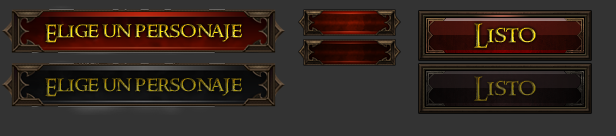
<style>
.page{position:relative;width:616px;height:136px;background:#333333}
.page>*{position:absolute;margin:0}
.t1{font:20.8px "RingbearerMedium";letter-spacing:-0.035em;scale:1.11 1}
.t2{font:23.1px "RingbearerMedium";letter-spacing:-0.035em;scale:1.11 1}
</style>
<div class="page">
<p class="t1" style="left:45px;top:24px;width:197px;height:19px">Elige un personaje</p>
<p class="t2" style="left:474px;top:23px;width:62px;height:25px">Listo</p>
<p class="t1" style="left:45px;top:78px;width:197px;height:19px">Elige un personaje</p>
<p class="t2" style="left:474px;top:76px;width:62px;height:25px">Listo</p>
</div>
